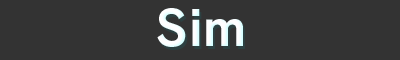
<style>
.page{position:relative;width:400px;height:60px;background:#333333}
.page>*{position:absolute;margin:0}
.t1{font:48px "RodinPro-B";color:#fffeff}
</style>
<div class="page">
<p class="t1" style="left:157px;top:8px;width:86px;height:39px">Sim</p>
</div>
